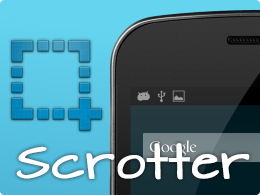
<style>
.page{position:relative;width:260px;height:195px}
.page>*{position:absolute;margin:0}
.t1{font:42px "ArchitectsDaughter";color:#ffffff;font-weight:bold}
</style>
<div class="page">
<p class="t1" style="left:16px;top:143px;width:234px;height:37px">Scrotter</p>
</div>
